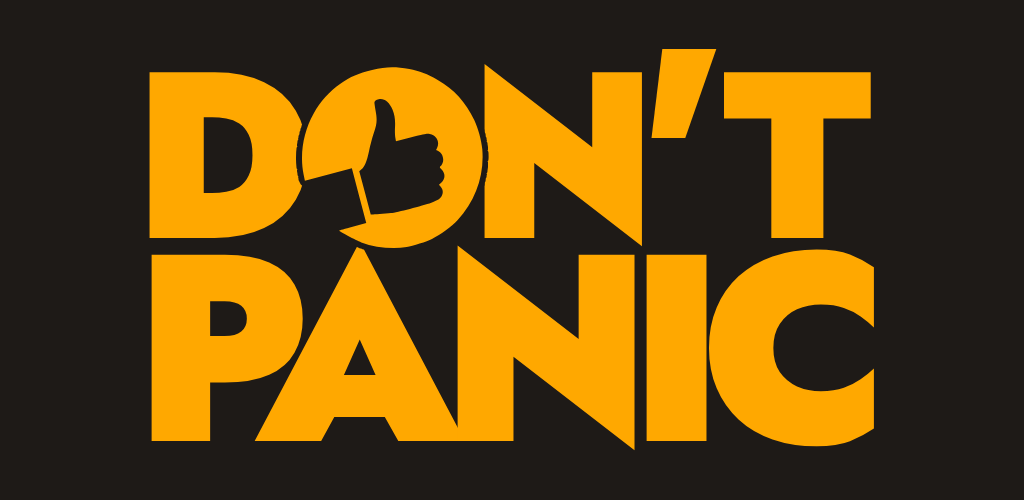
<style>
.page{position:relative;width:1024px;height:500px;background:#1e1a17}
.page>*{position:absolute;margin:0}
.t1{font:266px/203px "JostRoman-Black";letter-spacing:-0.092em;color:#ffa800}
.t2{font:236.6px/167.7px "JostRoman-Black";letter-spacing:-0.138em;color:#ffa800}
.t3{font:236.6px/167.7px "JostRoman-Black";letter-spacing:-0.087em;color:#ffa800}
.t4{font:270px/167.7px "JostRoman-Black";color:#ffa800}
.t5{font:236.6px/167.7px "JostRoman-Black";color:#ffa800}
.t6{font:266px/203px "JostRoman-Black";letter-spacing:-0.138em;color:#ffa800}
</style>
<div class="page">
<p class="t1" style="left:149px;top:49px;width:725px;height:402px"><span class="t2">D                           </span><span class="t3">N</span><span class="t4">'</span><span class="t5">T<br></span><span class="t6">P</span>ANIC</p>
</div>
